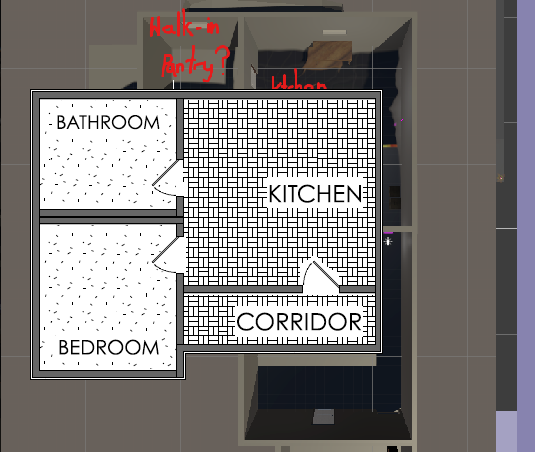
<style>
.page{position:relative;width:535px;height:452px;background:#ffffff}
.page>*{position:absolute;margin:0}
.t1{font:18.6px "CenturyGothic";letter-spacing:0.02em;color:#000000}
.t2{font:23.7px "CenturyGothic";letter-spacing:0.02em;color:#000000}
.t3{font:19.9px "CenturyGothic";letter-spacing:0.02em;color:#000000}
</style>
<div class="page">
<p class="t1" style="left:57px;top:115px;width:103px;height:15px">BATHROOM</p>
<p class="t2" style="left:269px;top:184px;width:92px;height:19px">KITCHEN</p>
<p class="t2" style="left:237px;top:312px;width:125px;height:19px">CORRIDOR</p>
<p class="t3" style="left:59px;top:339px;width:100px;height:16px">BEDROOM</p>
</div>
